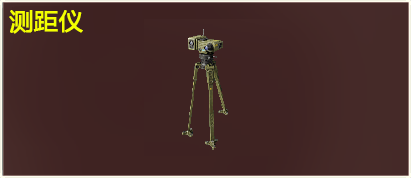
<style>
.page{position:relative;width:411px;height:178px}
.page>*{position:absolute;margin:0}
.t1{font:24px "MicrosoftYaHei";color:#f4ff00;font-weight:bold}
</style>
<div class="page">
<p class="t1" style="left:9px;top:10px;width:74px;height:24px">测距仪</p>
</div>
